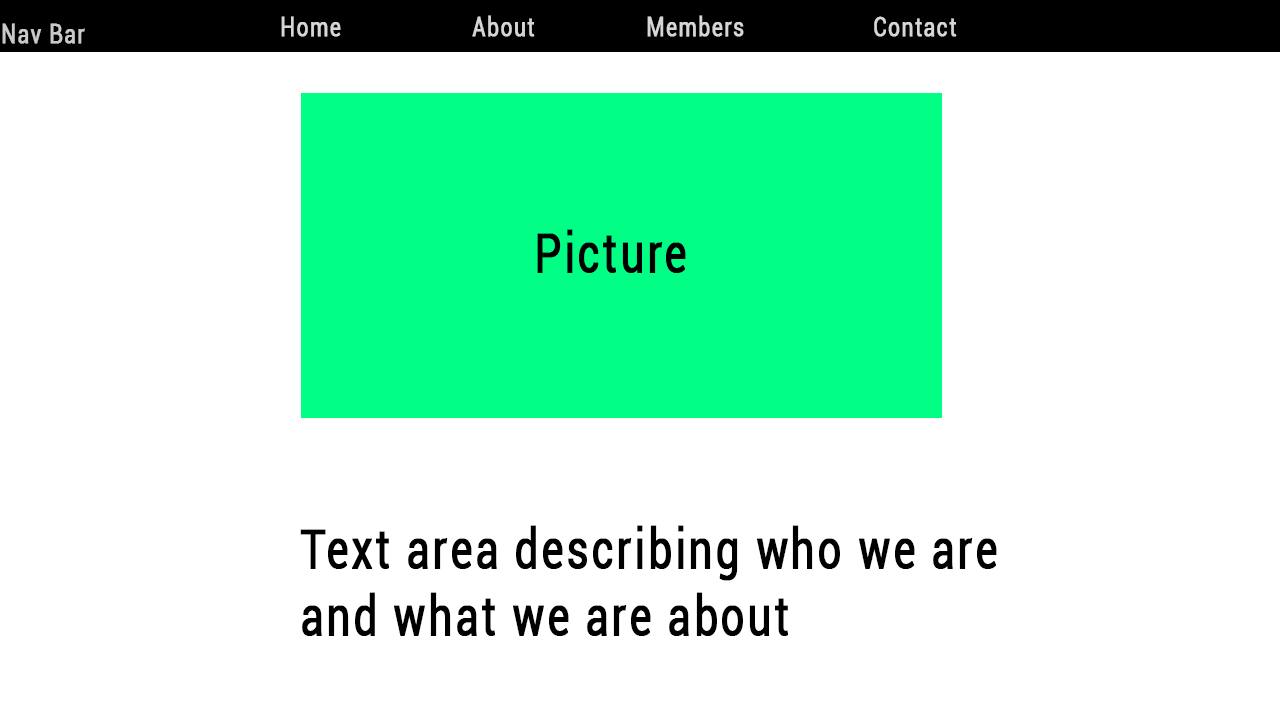
<style>
.page{position:relative;width:1280px;height:720px;background:#ffffff}
.page>*{position:absolute;margin:0}
.t1{font:27.1px "Roboto-Regular";letter-spacing:0.05em;color:#d6d6d6;font-weight:bold;scale:0.77 1}
.t2{font:27.1px "Roboto-Regular";letter-spacing:0.05em;color:#c9c9c7;font-weight:bold;scale:0.77 1}
.t3{font:54.2px "Roboto-Regular";letter-spacing:0.05em;color:#000000;font-weight:bold;scale:0.77 1}
.t4{font:54.2px/33.3px "Roboto-Regular";letter-spacing:0.05em;color:#000000;font-weight:bold;scale:0.77 1}
</style>
<div class="page">
<p class="t1" style="left:281px;top:16px;width:60px;height:21px">Home</p>
<p class="t1" style="left:472px;top:15px;width:63px;height:22px">About</p>
<p class="t1" style="left:647px;top:15px;width:97px;height:22px">Members</p>
<p class="t1" style="left:874px;top:16px;width:83px;height:21px">Contact</p>
<p class="t2" style="left:2px;top:23px;width:83px;height:21px">Nav Bar</p>
<p class="t3" style="left:537px;top:229px;width:149px;height:44px">Picture</p>
<p class="t4" style="left:300px;top:525px;width:697px;height:111px">Text area describing who we are<br><br>and what we are about</p>
</div>
